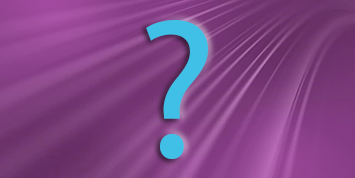
<style>
.page{position:relative;width:355px;height:178px}
.page>*{position:absolute;margin:0}
.t1{font:200px "MyriadPro-Regular";color:#40c0e7}
</style>
<div class="page">
<p class="t1" style="left:146px;top:19px;width:62px;height:140px">?</p>
</div>
